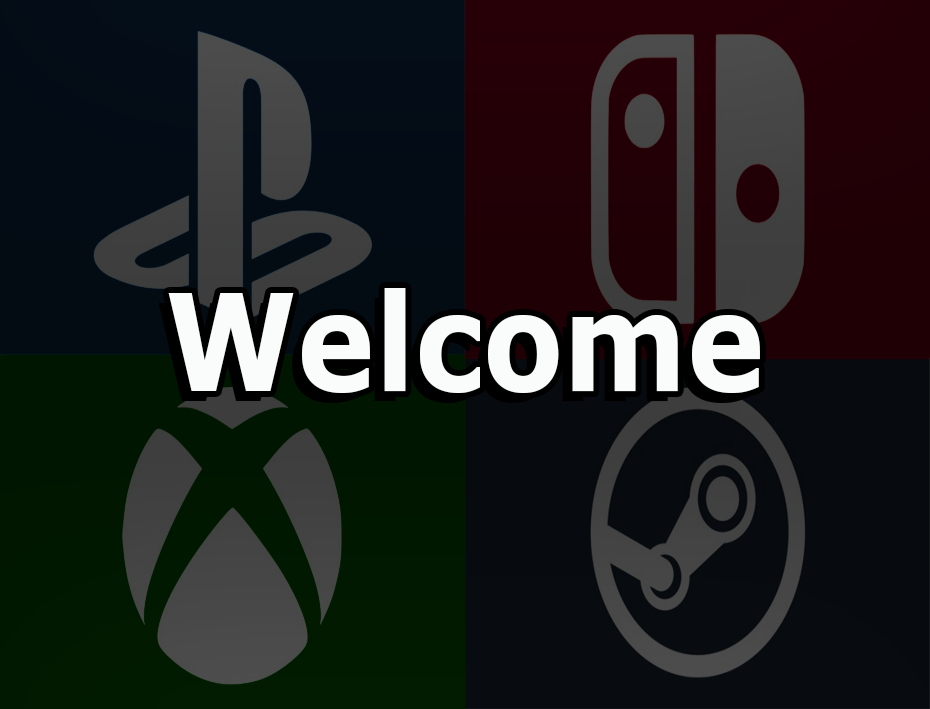
<style>
.page{position:relative;width:930px;height:709px}
.page>*{position:absolute;margin:0}
.t1{font:134.6px "Verdana-Bold";color:#fafbfb;scale:0.87 1}
</style>
<div class="page">
<p class="t1" style="left:168px;top:288px;width:592px;height:105px">Welcome</p>
</div>
